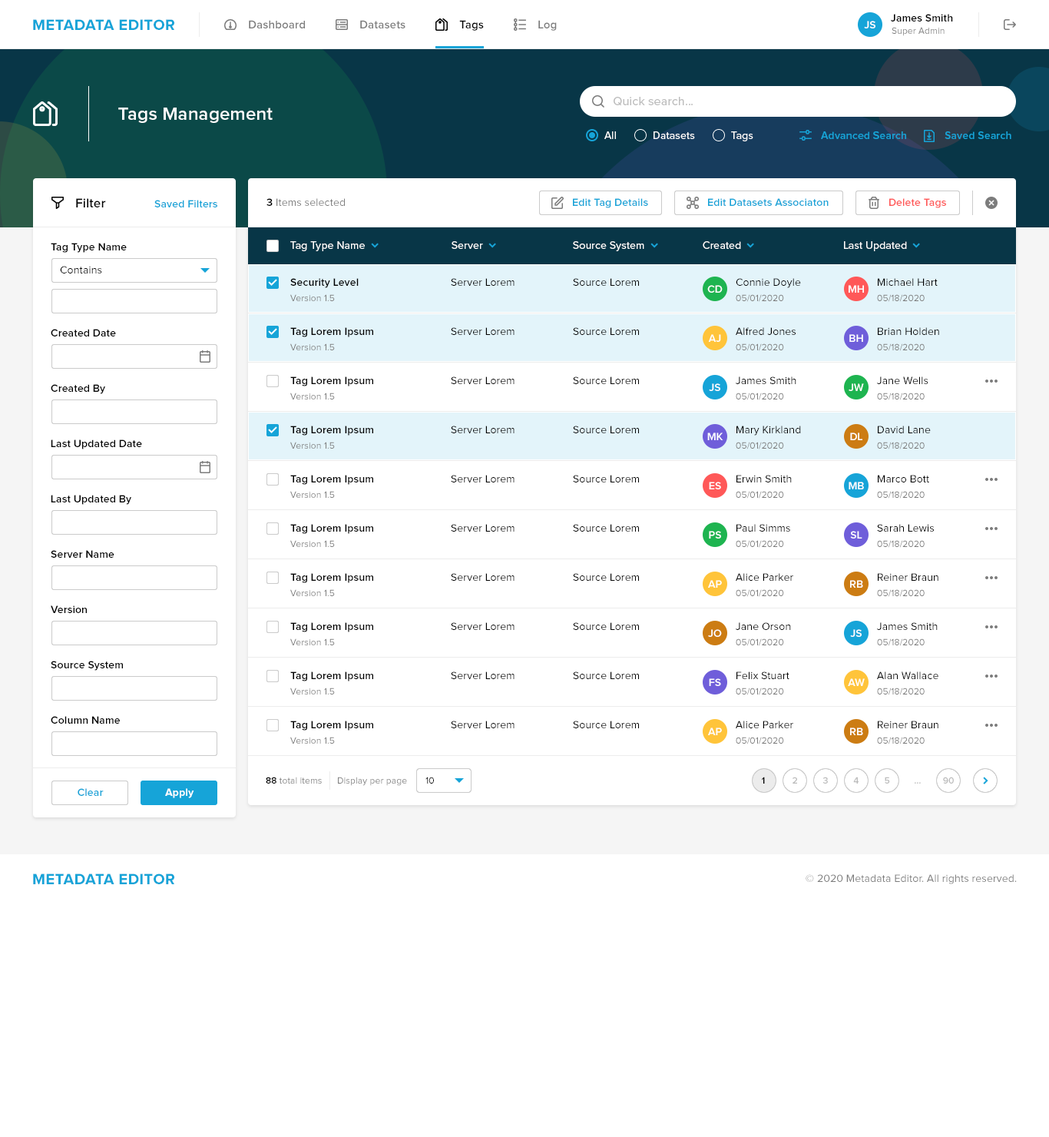
<style>
.page{position:relative;width:1049px;height:1137px;background:#ffffff}
.page>*{position:absolute;margin:0}
.t1{font:10.8px "ProximaNova-Semibold";letter-spacing:0.01em;color:#000000}
.t2{font:15.4px "ProximaNova-Bold";letter-spacing:0.025em;color:#16a4d8;text-transform:uppercase}
.t3{font:11.5px "ProximaNova-Semibold";letter-spacing:0.01em;color:#7c7c7c}
.t4{font:11.5px "ProximaNova-Semibold";letter-spacing:0.01em;color:#000000}
.t5{font:10.8px "ProximaNova-Semibold";letter-spacing:0.01em;color:#ffffff}
.t6{font:9.2px "ProximaNova-Regular";letter-spacing:0.01em;color:#7c7c7c}
.t7{font:12.3px "ProximaNova-Regular";letter-spacing:0.01em;color:#bcbcbc}
.t8{font:18.4px "ProximaNova-Semibold";letter-spacing:0.01em;color:#ffffff}
.t9{font:10.8px "ProximaNova-Regular";letter-spacing:0.01em;color:#ffffff}
.t10{font:10.8px "ProximaNova-Semibold";letter-spacing:0.01em;color:#16a4d8}
.t11{font:13.1px "ProximaNova-Semibold";letter-spacing:0.01em;color:#000000}
.t12{font:10.8px "ProximaNova-Regular";letter-spacing:0.01em;color:#7c7c7c}
.t13{font:10.8px "ProximaNova-Semibold";letter-spacing:0.01em;color:#ff5858}
.t14{font:10.8px "ProximaNova-Regular";letter-spacing:0.01em;color:#000000}
.t15{font:10.8px/49.2px "ProximaNova-Semibold";letter-spacing:0.01em;color:#000000}
.t16{font:10.8px/49.2px "ProximaNova-Regular";letter-spacing:0.01em;color:#000000}
.t17{font:9.2px/49.2px "ProximaNova-Regular";letter-spacing:0.01em;color:#7c7c7c}
.t18{font:9.2px "ProximaNova-Semibold";letter-spacing:0.01em;color:#000000}
.t19{font:9.2px "ProximaNova-Regular";letter-spacing:0.01em;color:#000000}
.t20{font:9.2px "ProximaNova-Semibold";letter-spacing:0.01em;color:#bcbcbc}
.t21{font:9.2px "ProximaNova-Semibold";letter-spacing:0.01em}
.t22{font:10.8px "ProximaNova-Bold";letter-spacing:0.01em;color:#ffffff}
</style>
<div class="page">
<p class="t1" style="left:891px;top:14px;width:62px;height:8px">James Smith</p>
<p class="t2" style="left:33px;top:19px;width:141px;height:11px">Metadata Editor</p>
<p class="t3" style="left:249px;top:20px;width:56px;height:8px">Dashboard</p>
<p class="t3" style="left:360px;top:20px;width:46px;height:8px">Datasets</p>
<p class="t4" style="left:459px;top:20px;width:25px;height:11px">Tags</p>
<p class="t3" style="left:538px;top:20px;width:19px;height:11px">Log</p>
<p class="t5" style="left:864px;top:21px;width:12px;height:7px">JS</p>
<p class="t6" style="left:892px;top:27px;width:53px;height:9px">Super Admin</p>
<p class="t7" style="left:614px;top:97px;width:79px;height:9px">Quick search...</p>
<p class="t8" style="left:118px;top:108px;width:155px;height:15px">Tags Management</p>
<p class="t9" style="left:604px;top:131px;width:12px;height:8px">All</p>
<p class="t9" style="left:654px;top:131px;width:41px;height:8px">Datasets</p>
<p class="t9" style="left:731px;top:131px;width:22px;height:10px">Tags</p>
<p class="t10" style="left:821px;top:131px;width:85px;height:8px">Advanced Search</p>
<p class="t10" style="left:945px;top:131px;width:66px;height:8px">Saved Search</p>
<p class="t11" style="left:76px;top:198px;width:30px;height:9px">Filter</p>
<p class="t10" style="left:154px;top:200px;width:63px;height:7px">Saved Filters</p>
<p class="t12" style="left:266px;top:198px;width:79px;height:8px"><span class="t1">3</span> Items selected</p>
<p class="t10" style="left:573px;top:198px;width:75px;height:10px">Edit Tag Details</p>
<p class="t10" style="left:708px;top:198px;width:121px;height:8px">Edit Datasets Associaton</p>
<p class="t13" style="left:889px;top:198px;width:57px;height:10px">Delete Tags</p>
<p class="t1" style="left:51px;top:243px;width:76px;height:10px">Tag Type Name</p>
<p class="t9" style="left:290px;top:241px;width:75px;height:10px">Tag Type Name</p>
<p class="t9" style="left:452px;top:241px;width:31px;height:8px">Server</p>
<p class="t9" style="left:573px;top:241px;width:71px;height:10px">Source System</p>
<p class="t9" style="left:703px;top:241px;width:38px;height:8px">Created</p>
<p class="t9" style="left:844px;top:241px;width:63px;height:10px">Last Updated</p>
<p class="t14" style="left:60px;top:266px;width:42px;height:7px">Contains</p>
<p class="t15" style="left:290px;top:278px;width:83px;height:452px">Security Level<br>Tag Lorem Ipsum<br>Tag Lorem Ipsum<br>Tag Lorem Ipsum<br>Tag Lorem Ipsum<br>Tag Lorem Ipsum<br>Tag Lorem Ipsum<br>Tag Lorem Ipsum<br>Tag Lorem Ipsum<br>Tag Lorem Ipsum</p>
<p class="t16" style="left:451px;top:278px;width:64px;height:450px">Server Lorem<br>Server Lorem<br>Server Lorem<br>Server Lorem<br>Server Lorem<br>Server Lorem<br>Server Lorem<br>Server Lorem<br>Server Lorem<br>Server Lorem</p>
<p class="t16" style="left:573px;top:278px;width:66px;height:450px">Source Lorem<br>Source Lorem<br>Source Lorem<br>Source Lorem<br>Source Lorem<br>Source Lorem<br>Source Lorem<br>Source Lorem<br>Source Lorem<br>Source Lorem</p>
<p class="t16" style="left:736px;top:278px;width:65px;height:450px">Connie Doyle<br>Alfred Jones<br>James Smith<br>Mary Kirkland<br>Erwin Smith<br>Paul Simms<br>Alice Parker<br>Jane Orson<br>Felix Stuart<br>Alice Parker</p>
<p class="t16" style="left:877px;top:278px;width:62px;height:450px">Michael Hart<br>Brian Holden<br>Jane Wells<br>David Lane<br>Marco Bott<br>Sarah Lewis<br>Reiner Braun<br>James Smith<br>Alan Wallace<br>Reiner Braun</p>
<p class="t17" style="left:736px;top:294px;width:48px;height:450px">05/01/2020<br>05/01/2020<br>05/01/2020<br>05/01/2020<br>05/01/2020<br>05/01/2020<br>05/01/2020<br>05/01/2020<br>05/01/2020<br>05/01/2020</p>
<p class="t17" style="left:877px;top:294px;width:48px;height:450px">05/18/2020<br>05/18/2020<br>05/18/2020<br>05/18/2020<br>05/18/2020<br>05/18/2020<br>05/18/2020<br>05/18/2020<br>05/18/2020<br>05/18/2020</p>
<p class="t1" style="left:51px;top:329px;width:65px;height:7px">Created Date</p>
<p class="t1" style="left:51px;top:384px;width:54px;height:10px">Created By</p>
<p class="t1" style="left:51px;top:439px;width:91px;height:10px">Last Updated Date</p>
<p class="t1" style="left:51px;top:495px;width:80px;height:10px">Last Updated By</p>
<p class="t1" style="left:51px;top:550px;width:63px;height:8px">Server Name</p>
<p class="t1" style="left:51px;top:605px;width:36px;height:8px">Version</p>
<p class="t1" style="left:51px;top:660px;width:72px;height:10px">Source System</p>
<p class="t1" style="left:51px;top:716px;width:69px;height:7px">Column Name</p>
<p class="t6" style="left:266px;top:776px;width:56px;height:7px"><span class="t18">88</span> total items</p>
<p class="t6" style="left:338px;top:776px;width:69px;height:10px">Display per page</p>
<p class="t19" style="left:425px;top:776px;width:9px;height:7px">10</p>
<p class="t18" style="left:762px;top:776px;width:3px;height:7px">1</p>
<p class="t20" style="left:793px;top:776px;width:4px;height:7px">2</p>
<p class="t20" style="left:823px;top:776px;width:5px;height:7px">3</p>
<p class="t20" style="left:853px;top:776px;width:6px;height:7px">4</p>
<p class="t20" style="left:885px;top:776px;width:5px;height:7px">5</p>
<p class="t21" style="left:915px;top:782px;width:6px;height:1px">...</p>
<p class="t20" style="left:943px;top:776px;width:11px;height:7px">90</p>
<p class="t10" style="left:78px;top:788px;width:26px;height:8px">Clear</p>
<p class="t22" style="left:165px;top:788px;width:29px;height:10px">Apply</p>
<p class="t2" style="left:33px;top:873px;width:141px;height:11px">MetaData Editor</p>
<p class="t12" style="left:806px;top:874px;width:211px;height:10px">© 2020 Metadata Editor. All rights reserved.</p>
</div>
